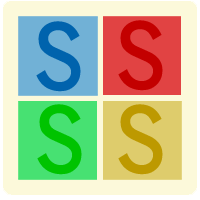
<style>
.page{position:relative;width:200px;height:200px;background:#fcf9da}
.page>*{position:absolute;margin:0}
.t1{font:90px "BellGothicStd-Bold";color:#0063ad;font-weight:bold}
.t2{font:90px "BellGothicStd-Bold";color:#c30000;font-weight:bold}
.t3{font:90px "BellGothicStd-Bold";color:#00c300;font-weight:bold}
.t4{font:90px "BellGothicStd-Bold";color:#bd9900;font-weight:bold}
</style>
<div class="page">
<p class="t1" style="left:36px;top:21px;width:45px;height:71px">S</p>
<p class="t2" style="left:118px;top:20px;width:45px;height:71px">S</p>
<p class="t3" style="left:37px;top:104px;width:45px;height:71px">S</p>
<p class="t4" style="left:118px;top:104px;width:45px;height:71px">S</p>
</div>
